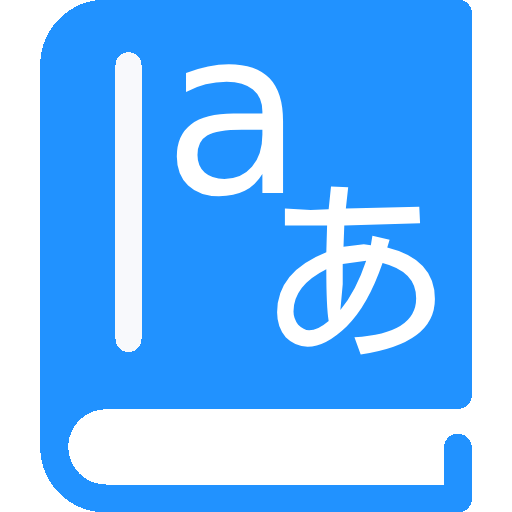
<style>
.page{position:relative;width:512px;height:512px;background:#2192ff}
.page>*{position:absolute;margin:0}
.t1{font:230px "DejaVuSans";color:#ffffff}
.t2{font:200px "DroidSansFallback";color:#ffffff}
</style>
<div class="page">
<p class="t1" style="left:176px;top:64px;width:108px;height:133px">a</p>
<p class="t2" style="left:277px;top:186px;width:158px;height:169px">あ</p>
</div>
